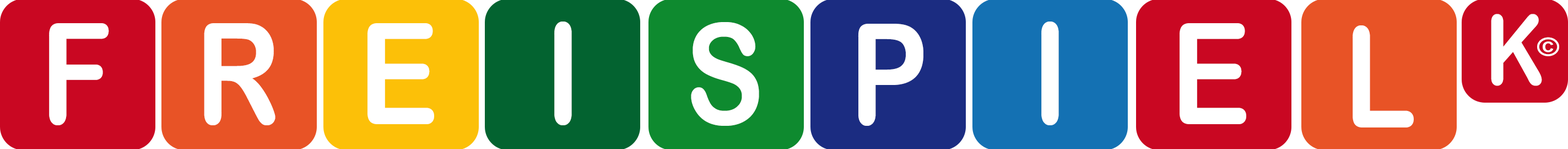
<style>
.page{position:relative;width:1568px;height:149px}
.page>*{position:absolute;margin:0}
.t1{font:96.4px "ArialRoundedMTBold";color:#ffffff;scale:0.86 1}
.t2{font:140.1px "ArialRoundedMTBold";color:#ffffff;scale:0.85 1}
.t3{font:140.9px "ArialRoundedMTBold";color:#ffffff;scale:0.86 1}
.t4{font:25.3px "ArialRoundedMTBold";color:#ffffff;scale:1.17 1}
</style>
<div class="page">
<p class="t1" style="left:1491px;top:14px;width:51px;height:72px">K</p>
<p class="t2" style="left:49px;top:23px;width:60px;height:102px">F</p>
<p class="t2" style="left:204px;top:23px;width:71px;height:102px">R</p>
<p class="t3" style="left:367px;top:23px;width:67px;height:101px">E</p>
<p class="t2" style="left:554px;top:21px;width:18px;height:104px">I</p>
<p class="t2" style="left:691px;top:22px;width:68px;height:104px">S</p>
<p class="t2" style="left:858px;top:24px;width:65px;height:102px">P</p>
<p class="t2" style="left:1041px;top:21px;width:18px;height:104px">I</p>
<p class="t3" style="left:1180px;top:23px;width:66px;height:101px">E</p>
<p class="t2" style="left:1353px;top:25px;width:61px;height:102px">L</p>
<p class="t4" style="left:1537px;top:37px;width:22px;height:19px">©</p>
</div>
